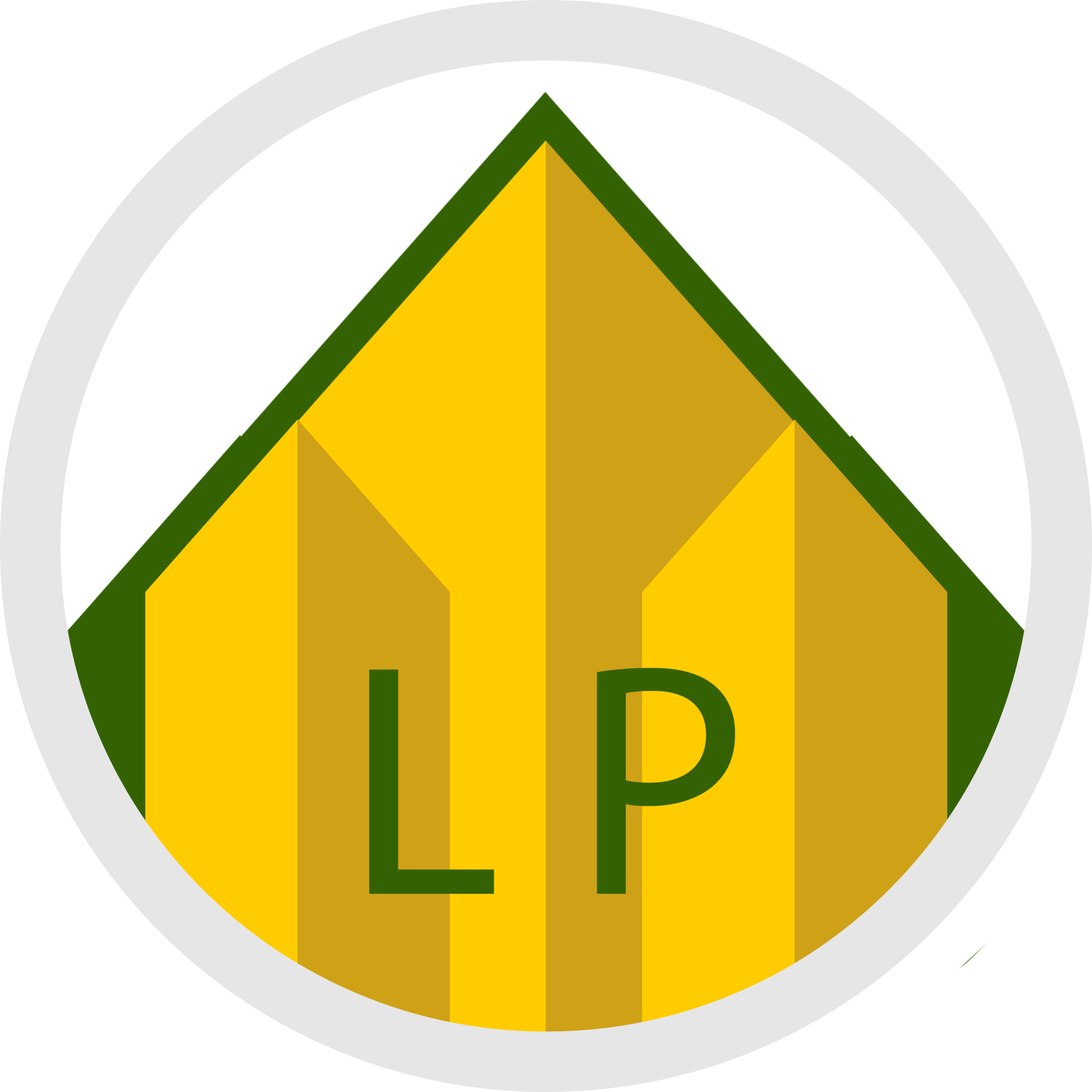
<style>
.page{position:relative;width:1092px;height:1092px;background:#ffffff}
.page>*{position:absolute;margin:0}
.t1{font:332.7px "MyriadPro-Regular";color:#346203}
</style>
<div class="page">
<p class="t1" style="left:369px;top:668px;width:366px;height:226px">L P</p>
</div>
